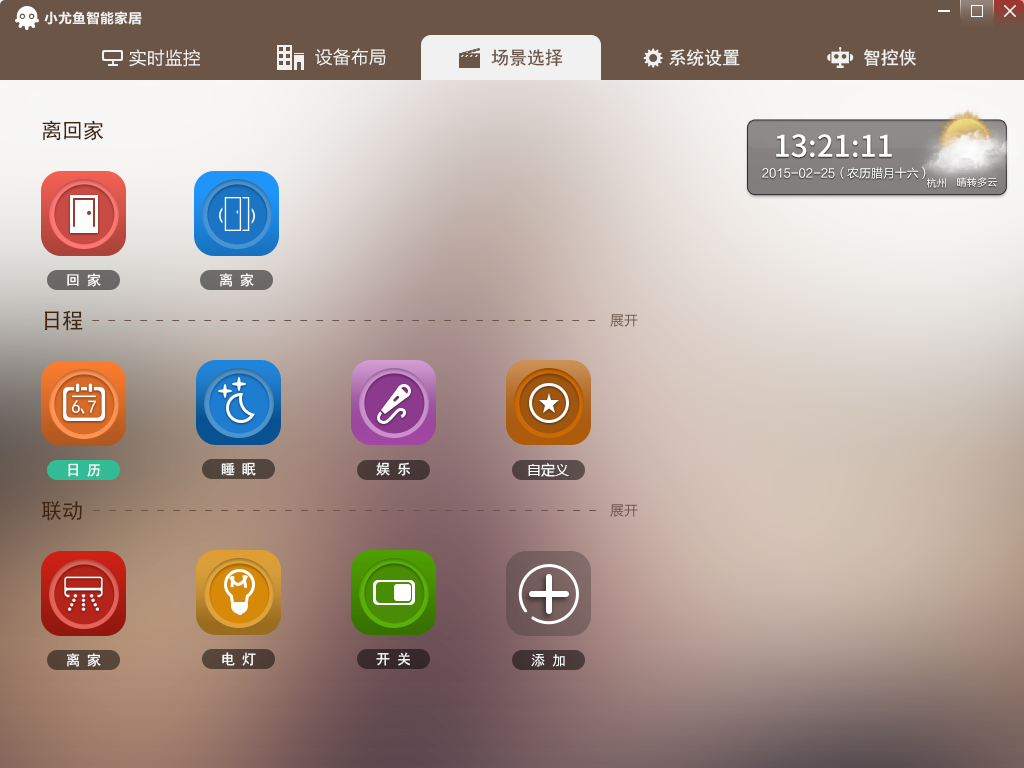
<style>
.page{position:relative;width:1024px;height:768px}
.page>*{position:absolute;margin:0}
.t1{font:14px "FZLTCHK--GBK1-0";color:#f1f1f1}
.t2{font:18px "FZLTHK--GBK1-0";color:#f1f1f1}
.t3{font:18px "SimHei";color:#6a5547}
.t4{font:18px "SimHei";color:#f1f1f1}
.t5{font:21px "SimHei";color:#402513}
.t6{font:30px "SourceHanSansCN-Medium";color:#ffffff}
.t7{font:12px "FZLTHJW--GB1-0";color:#ffffff}
.t8{font:10px "FZLTHJW--GB1-0";letter-spacing:0.025em;color:#ffffff}
.t9{font:14px "SimHei";letter-spacing:0.5em;color:#ffffff}
.t10{font:14px "FZLTHJW--GB1-0";color:#6a5547}
.t11{font:17.9px "SimHei";color:#ffffff}
.t12{font:14px "MicrosoftYaHei";color:#ffffff}
</style>
<div class="page">
<p class="t1" style="left:44px;top:11px;width:98px;height:14px">小尤鱼智能家居</p>
<p class="t2" style="left:129px;top:49px;width:71px;height:18px">实时监控</p>
<p class="t2" style="left:315px;top:48px;width:71px;height:18px">设备布局</p>
<p class="t3" style="left:491px;top:49px;width:72px;height:18px">场景选择</p>
<p class="t4" style="left:669px;top:49px;width:71px;height:17px">系统设置</p>
<p class="t4" style="left:864px;top:49px;width:52px;height:17px">智控侠</p>
<p class="t5" style="left:42px;top:120px;width:62px;height:21px">离回家</p>
<p class="t6" style="left:776px;top:134px;width:116px;height:24px">13:21:11</p>
<p class="t7" style="left:762px;top:167px;width:164px;height:12px">2015-02-25（农历腊月十六）</p>
<p class="t8" style="left:927px;top:178px;width:19px;height:10px">杭州</p>
<p class="t8" style="left:957px;top:177px;width:40px;height:10px">晴转多云</p>
<p class="t9" style="left:67px;top:273px;width:34px;height:14px">回家</p>
<p class="t9" style="left:219px;top:273px;width:35px;height:14px">离家</p>
<p class="t5" style="left:44px;top:310px;width:39px;height:21px">日程</p>
<p class="t10" style="left:610px;top:314px;width:28px;height:13px">展开</p>
<p class="t11" style="left:71px;top:400px;width:25px;height:14px">6、7</p>
<p class="t9" style="left:221px;top:462px;width:35px;height:14px">睡眠</p>
<p class="t9" style="left:376px;top:462px;width:34px;height:14px">娱乐</p>
<p class="t9" style="left:68px;top:463px;width:32px;height:14px">日历</p>
<p class="t12" style="left:528px;top:463px;width:41px;height:14px">自定义</p>
<p class="t5" style="left:41px;top:501px;width:41px;height:20px">联动</p>
<p class="t10" style="left:610px;top:504px;width:28px;height:13px">展开</p>
<p class="t9" style="left:66px;top:653px;width:35px;height:14px">离家</p>
<p class="t9" style="left:222px;top:652px;width:34px;height:14px">电灯</p>
<p class="t9" style="left:376px;top:652px;width:34px;height:14px">开关</p>
<p class="t9" style="left:531px;top:654px;width:34px;height:13px">添加</p>
</div>
